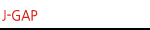
<style>
.page{position:relative;width:150px;height:30px;background:#ffffff}
.page>*{position:absolute;margin:0}
.t1{font:14px "NanumGothic";color:#dc241f;scale:0.9 1}
</style>
<div class="page">
<p class="t1" style="left:2px;top:10px;width:36px;height:11px">J-GAP</p>
</div>
